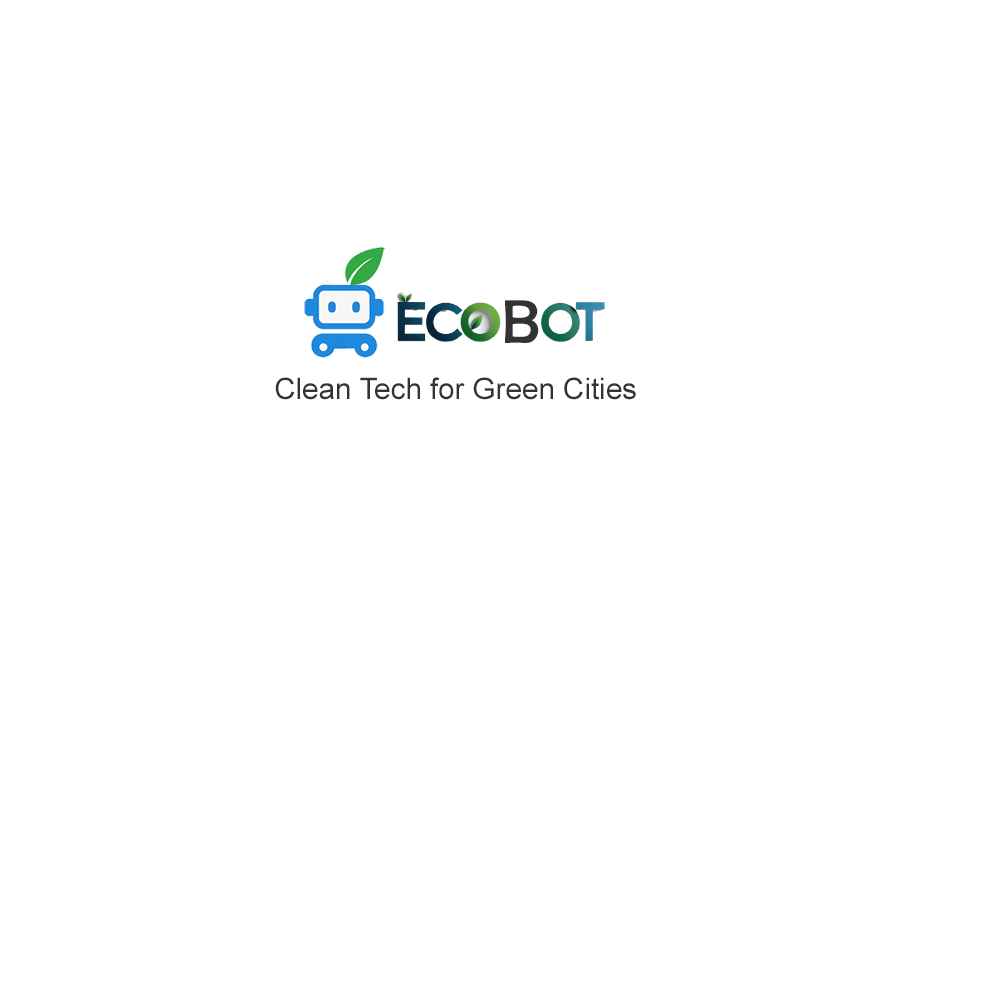
<style>
.page{position:relative;width:1000px;height:1000px;background:#ffffff}
.page>*{position:absolute;margin:0}
.t1{font:62.4px "BerlinSansFB-Reg";color:#333333}
.t2{font:29.6px "ArialMT";color:#333333}
</style>
<div class="page">
<p class="t1" style="left:505px;top:300px;width:34px;height:43px">B</p>
<p class="t2" style="left:275px;top:377px;width:361px;height:23px">Clean Tech for Green Cities</p>
</div>
